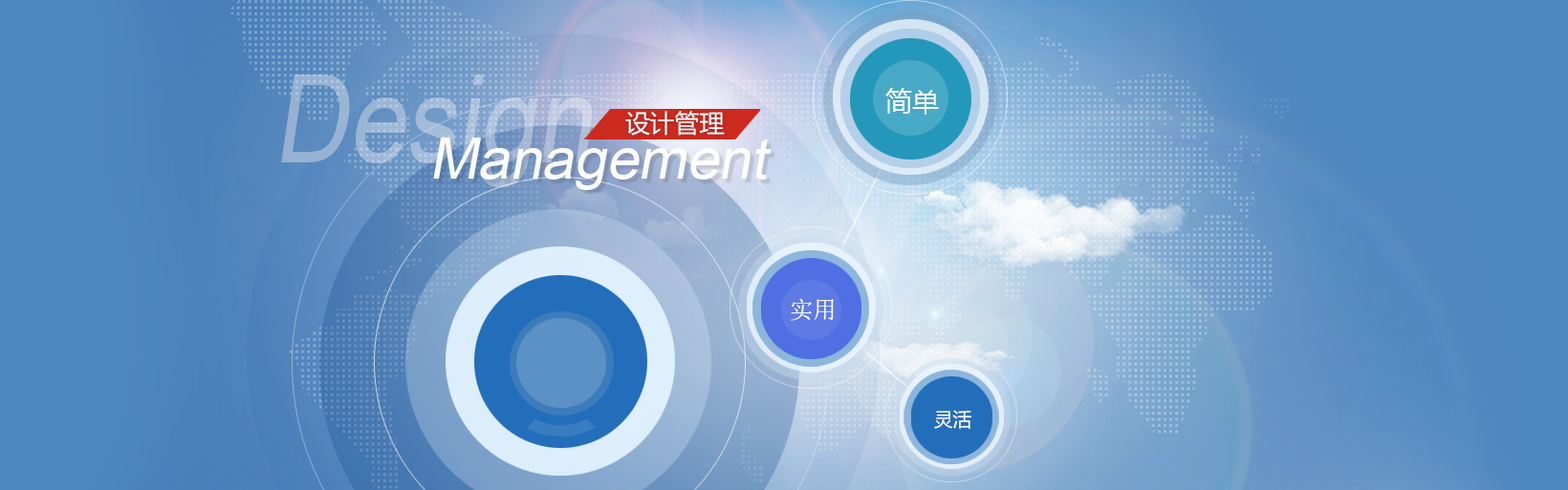
<style>
.page{position:relative;width:1568px;height:490px}
.page>*{position:absolute;margin:0}
.t1{font:122.4px "ArialMT";color:#a3bbd8;font-style:italic;scale:0.84 1}
.t2{font:26.8px "MicrosoftYaHei";color:#ffffff}
.t3{font:24.8px "MicrosoftYaHei";color:#ffffff}
.t4{font:57.4px "ArialMT";color:#ffffff;font-style:italic}
.t5{font:23.6px "SimSun";color:#ffffff}
.t6{font:19.1px "MicrosoftYaHei";color:#ffffff}
</style>
<div class="page">
<p class="t1" style="left:281px;top:75px;width:312px;height:112px">Design</p>
<p class="t2" style="left:885px;top:88px;width:54px;height:27px">简单</p>
<p class="t3" style="left:625px;top:111px;width:100px;height:25px">设计管理</p>
<p class="t4" style="left:433px;top:138px;width:339px;height:52px;opacity:0.95">Management</p>
<p class="t5" style="left:791px;top:298px;width:43px;height:23px">实用</p>
<p class="t6" style="left:934px;top:410px;width:38px;height:19px">灵活</p>
</div>
